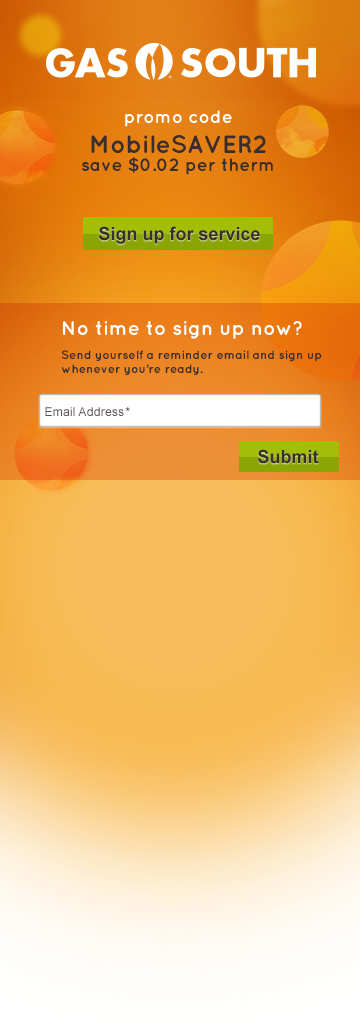
<style>
.page{position:relative;width:360px;height:1024px}
.page>*{position:absolute;margin:0}
.t1{font:18px/18px "Quicksand-Bold";color:#392e2c}
.t2{font:18px/24px "Quicksand-Bold";color:#ffffff}
.t3{font:25px/30px "Quicksand-Bold";color:#392e2c}
.t4{font:18px "Arial-BoldMT";color:#392e2c}
.t5{font:12px/24px "Quicksand-Bold";color:#392e2c}
.t6{font:20px "Quicksand-Bold";color:#ffffff}
.t7{font:12px/18px "Quicksand-Bold";color:#392e2c}
.t8{font:12px "Quicksand-Bold";color:#392e2c}
.t9{font:12px "ArialMT";letter-spacing:0.02em;color:#57504e}
</style>
<div class="page">
<p class="t1" style="left:82px;top:110px;width:191px;height:65px;text-align:center"><span class="t2">promo code<br></span><span class="t3">MobileSAVER2<br></span>save $0.02 per therm</p>
<p class="t4" style="left:99px;top:226px;width:161px;height:18px">Sign up for service</p>
<p class="t5" style="left:61px;top:321px;width:261px;height:54px"><span class="t6">No time to sign up now? <br></span>Send yourself a reminder email <span class="t7">and sign up <br></span><span class="t8">whenever you’re ready.</span></p>
<p class="t9" style="left:45px;top:407px;width:85px;height:9px">Email Address*</p>
<p class="t4" style="left:258px;top:449px;width:61px;height:15px">Submit</p>
</div>
